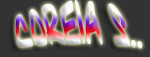
<style>
.page{position:relative;width:150px;height:57px;background:#333333}
.page>*{position:absolute;margin:0}
.t1{font:36px "EncoreNorScriptCasedOblique"}
</style>
<div class="page">
<p class="t1" style="left:15px;top:0px;width:127px;height:49px">COREIA S..</p>
</div>
